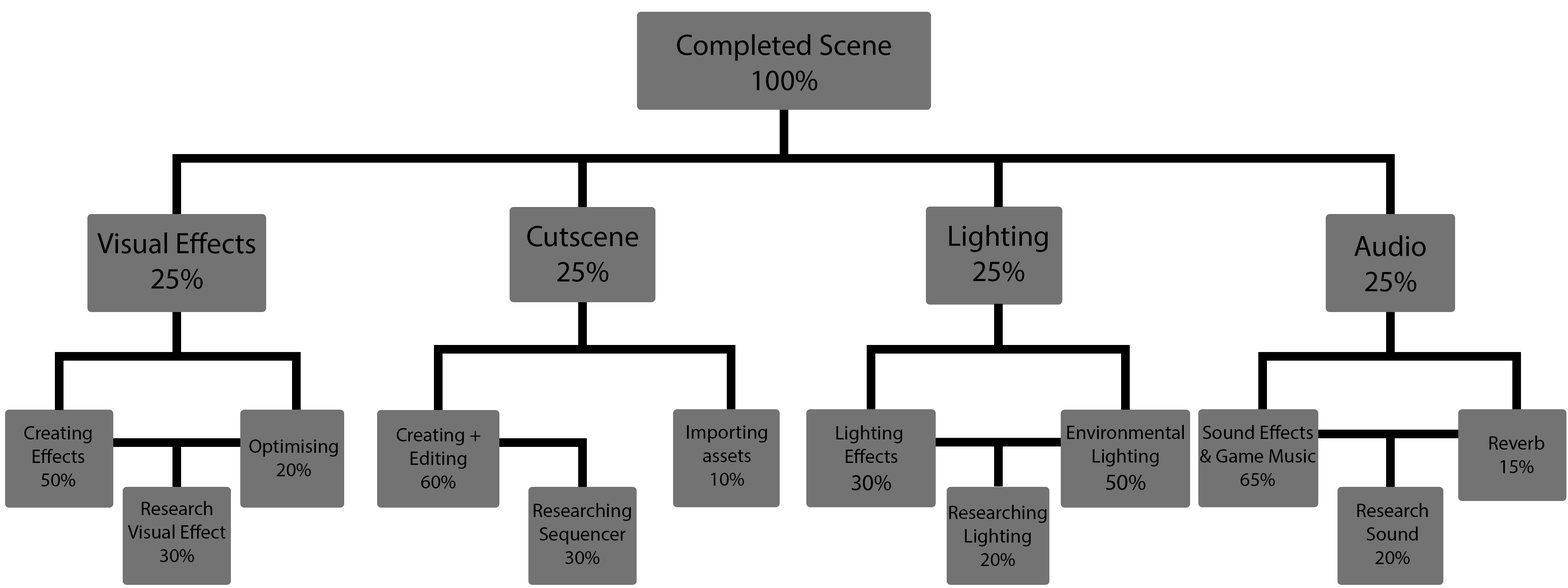
<style>
.page{position:relative;width:1568px;height:588px;background:#ffffff}
.page>*{position:absolute;margin:0}
.t1{font:29.4px "MyriadPro-Regular";color:#000000}
.t2{font:19.6px "MyriadPro-Regular";color:#000000}
.t3{font:22.9px "MyriadPro-Regular";color:#000000}
</style>
<div class="page">
<p class="t1" style="left:677px;top:34px;width:214px;height:57px;text-align:center">Completed Scene<br>100%</p>
<p class="t1" style="left:97px;top:232px;width:158px;height:57px;text-align:center">Visual Effects<br>25%</p>
<p class="t1" style="left:527px;top:226px;width:111px;height:56px;text-align:center">Cutscene<br>25%</p>
<p class="t1" style="left:949px;top:225px;width:99px;height:56px;text-align:center">Lighting<br>25%</p>
<p class="t1" style="left:1354px;top:235px;width:72px;height:57px;text-align:center">Audio<br>25%</p>
<p class="t2" style="left:687px;top:425px;width:80px;height:61px;text-align:center">Importing<br>assets<br>10%</p>
<p class="t2" style="left:836px;top:425px;width:66px;height:66px;text-align:center">Lighting <br>Effects<br><span class="t3">30%</span></p>
<p class="t2" style="left:1067px;top:425px;width:117px;height:65px;text-align:center">Environmental<br>Lighting<br><span class="t3">50%</span></p>
<p class="t2" style="left:1200px;top:425px;width:116px;height:61px;text-align:center">Sound Effects<br>&amp; Game Music<br>65%</p>
<p class="t2" style="left:24px;top:426px;width:68px;height:61px;text-align:center">Creating<br>Effects<br>50%</p>
<p class="t2" style="left:397px;top:428px;width:84px;height:61px;text-align:center">Creating +<br>Editing<br>60%</p>
<p class="t2" style="left:1489px;top:436px;width:55px;height:38px;text-align:center">Reverb<br>15%</p>
<p class="t2" style="left:249px;top:439px;width:89px;height:38px;text-align:center">Optimising<br>20%</p>
<p class="t2" style="left:128px;top:501px;width:98px;height:62px;text-align:center">Research<br>Visual Effect<br>30%</p>
<p class="t2" style="left:534px;top:503px;width:97px;height:61px;text-align:center">Researching<br>Sequencer<br>30%</p>
<p class="t2" style="left:949px;top:505px;width:98px;height:61px;text-align:center">Researching<br>Lighting<br>20%</p>
<p class="t2" style="left:1357px;top:503px;width:71px;height:61px;text-align:center">Research<br>Sound<br>20%</p>
</div>
